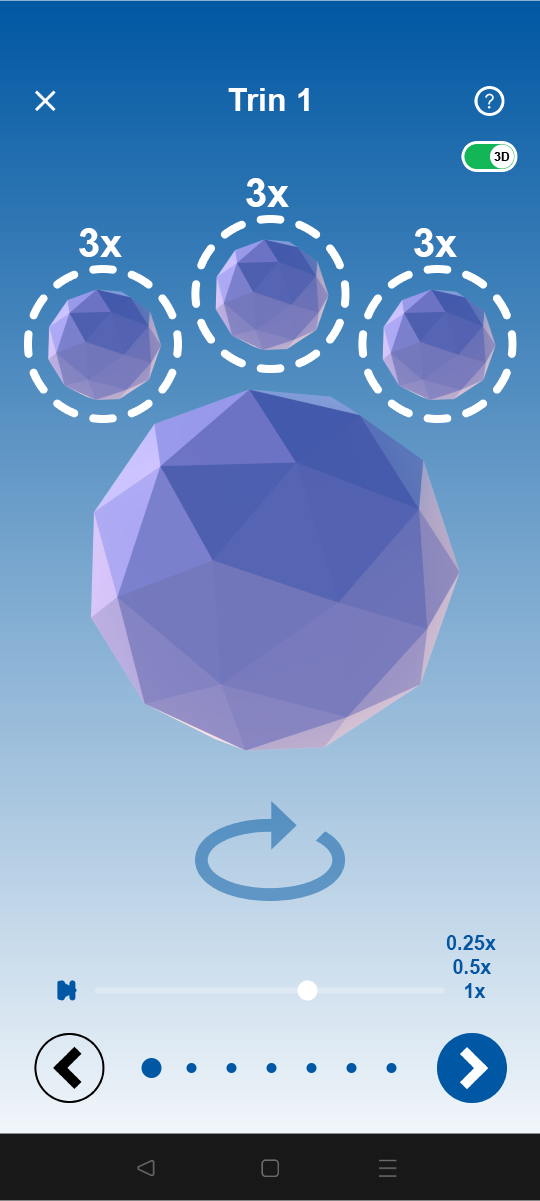
<style>
.page{position:relative;width:540px;height:1201px}
.page>*{position:absolute;margin:0}
.t1{font:32px "Arial-BoldMT";color:#ffffff}
.t2{font:40px "Arial-BoldMT";color:#ffffff}
.t3{font:20px "Arial-BoldMT";color:#0058a4}
</style>
<div class="page">
<p class="t1" style="left:228px;top:88px;width:81px;height:23px">Trin 1</p>
<p class="t2" style="left:246px;top:178px;width:43px;height:29px">3x</p>
<p class="t2" style="left:79px;top:228px;width:43px;height:29px">3x</p>
<p class="t2" style="left:414px;top:228px;width:43px;height:29px">3x</p>
<p class="t3" style="left:446px;top:935px;width:50px;height:15px">0.25x</p>
<p class="t3" style="left:453px;top:959px;width:38px;height:15px">0.5x</p>
<p class="t3" style="left:465px;top:983px;width:21px;height:15px">1x</p>
</div>
